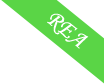
<style>
.page{position:relative;width:104px;height:84px;background:#ffffff}
.page>*{position:absolute;margin:0}
.t1{font:24px "MonotypeCorsiva";color:#ffffff}
</style>
<div class="page">
<p class="t1" style="left:47px;top:13px;width:42px;height:36px;rotate:39deg">REA</p>
</div>
